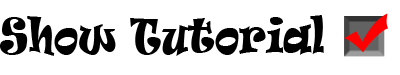
<style>
.page{position:relative;width:400px;height:75px;background:#ffffff}
.page>*{position:absolute;margin:0}
.t1{font:45.2px "Ravie";color:#000000;scale:0.76 1}
</style>
<div class="page">
<p class="t1" style="left:0px;top:15px;width:324px;height:41px">Show Tutorial</p>
</div>
